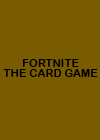
<style>
.page{position:relative;width:100px;height:140px;background:#795b01}
.page>*{position:absolute;margin:0}
.t1{font:11px/10px "ArialRoundedMTBold";letter-spacing:0.01em;color:#000000}
</style>
<div class="page">
<p class="t1" style="left:3px;top:59px;width:95px;height:18px;text-align:center">FORTNITE<br>THE CARD GAME</p>
</div>
